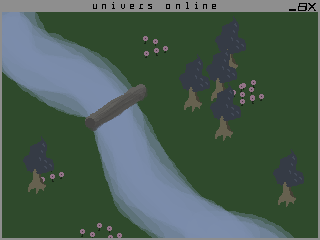
<style>
.page{position:relative;width:320px;height:240px;background:#2f4a2c}
.page>*{position:absolute;margin:0}
.t1{font:10px "Fabryka4FMedium";color:#000000}
</style>
<div class="page">
<p class="t1" style="left:93px;top:2px;width:123px;height:7px">U n i v e r s   O n l i n e</p>
</div>
